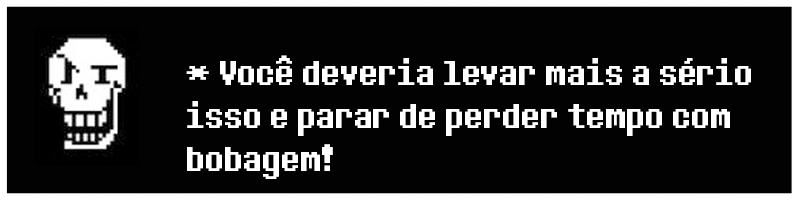
<style>
.page{position:relative;width:800px;height:200px;background:#020202}
.page>*{position:absolute;margin:0}
.t1{font:36px "DeterminationSans";color:#ffffff}
</style>
<div class="page">
<p class="t1" style="left:186px;top:55px;width:565px;height:124px">* Você deveria levar mais a sério <br>isso e parar de perder tempo com bobagem!</p>
</div>
